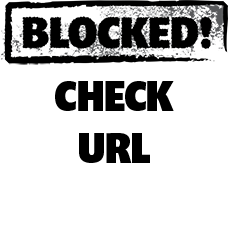
<style>
.page{position:relative;width:228px;height:228px;background:#ffffff}
.page>*{position:absolute;margin:0}
.t1{font:43px "PrentonRPCondBlack-Regular";color:#000000}
</style>
<div class="page">
<p class="t1" style="left:55px;top:81px;width:119px;height:82px;text-align:center">CHECK<br>URL</p>
</div>
